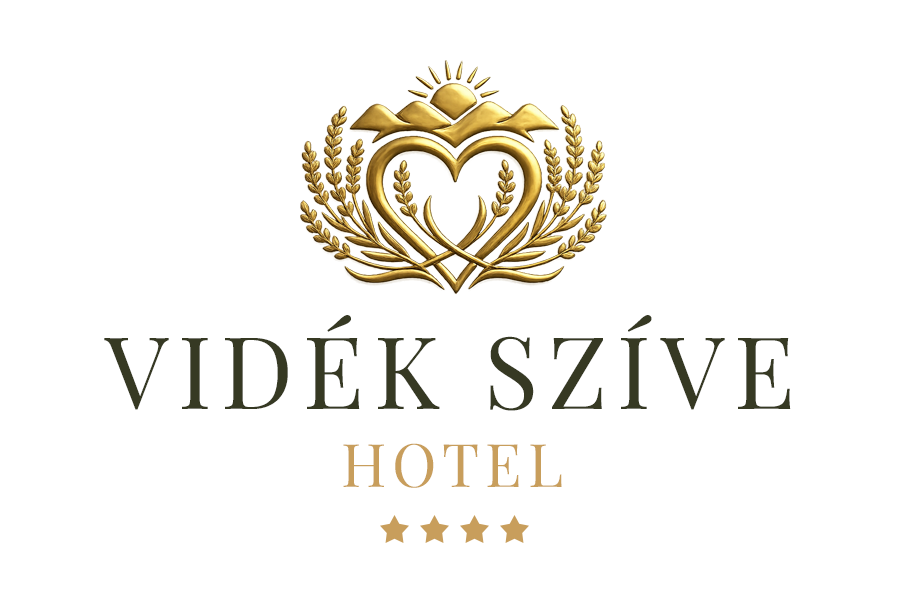
<style>
.page{position:relative;width:910px;height:607px;background:#ffffff}
.page>*{position:absolute;margin:0}
.t1{font:100.2px "PlayfairDisplay-Regular";letter-spacing:0.1em;color:#363923}
.t2{font:60px "PlayfairDisplay-Regular";letter-spacing:0.1em;color:#c89e5c}
</style>
<div class="page">
<p class="t1" style="left:104px;top:315px;width:687px;height:96px">VIDÉK SZÍVE</p>
<p class="t2" style="left:343px;top:443px;width:219px;height:45px">HOTEL</p>
</div>
